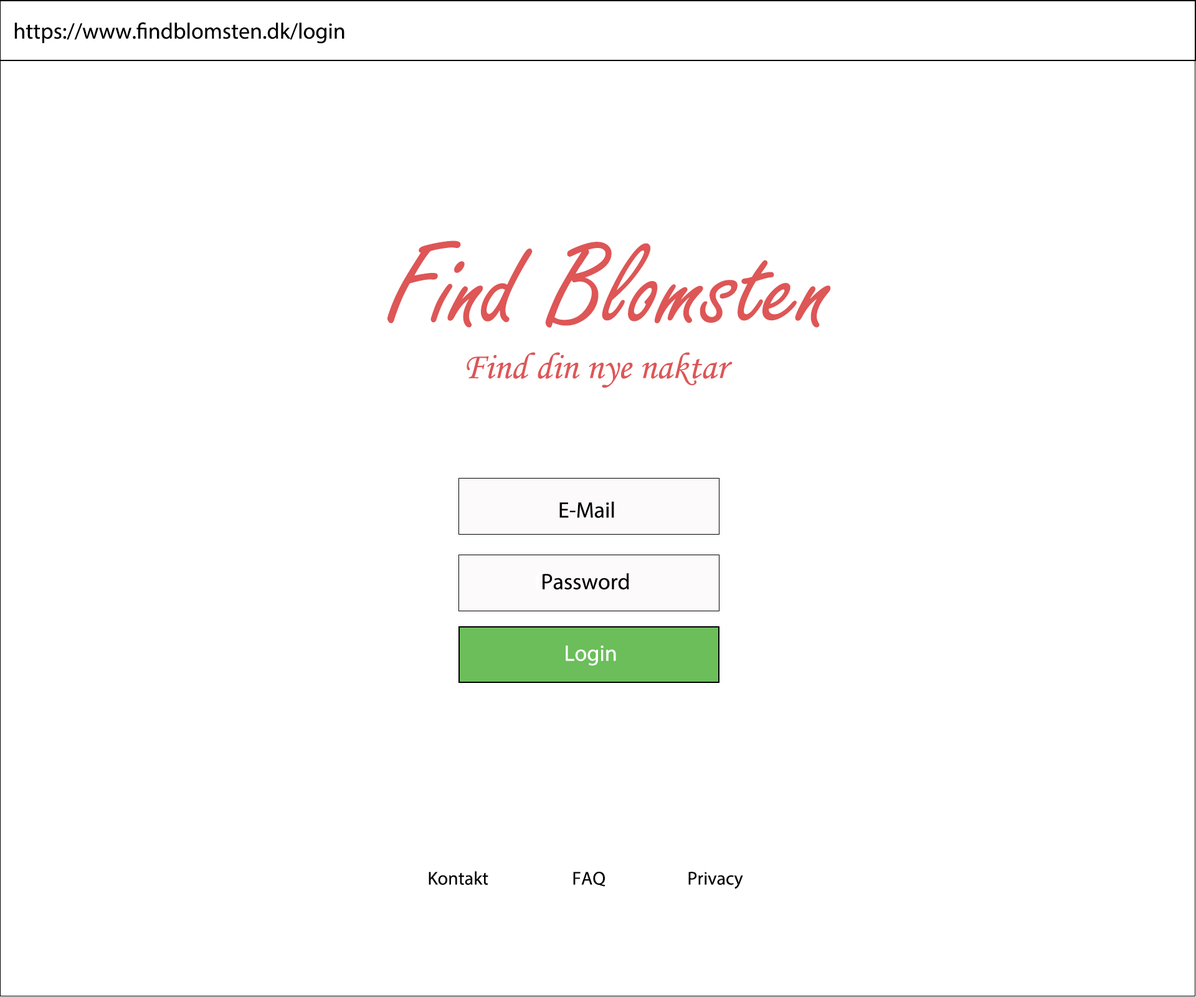
<style>
.page{position:relative;width:1196px;height:997px;background:#ffffff}
.page>*{position:absolute;margin:0}
.t1{font:22.4px "MyriadPro-Regular";color:#000000}
.t2{font:124.6px "FreestyleScript-Regular";color:#de5656}
.t3{font:37.4px "MonotypeCorsiva";color:#de5656}
.t4{font:22.4px "MyriadPro-Regular";color:#ffffff}
.t5{font:18.7px "MyriadPro-Regular";color:#000000}
</style>
<div class="page">
<p class="t1" style="left:14px;top:22px;width:331px;height:22px">https://www.findblomsten.dk/login</p>
<p class="t2" style="left:387px;top:240px;width:444px;height:88px">Find Blomsten</p>
<p class="t3" style="left:467px;top:352px;width:266px;height:36px">Find din nye naktar</p>
<p class="t1" style="left:559px;top:502px;width:55px;height:16px">E-Mail</p>
<p class="t1" style="left:535px;top:573px;width:94px;height:16px"><span class="t4">f</span>Password</p>
<p class="t4" style="left:566px;top:645px;width:50px;height:20px">Login</p>
<p class="t5" style="left:429px;top:871px;width:59px;height:14px">Kontakt</p>
<p class="t5" style="left:573px;top:872px;width:33px;height:15px">FAQ</p>
<p class="t5" style="left:688px;top:872px;width:55px;height:17px">Privacy</p>
</div>
